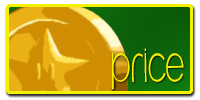
<style>
.page{position:relative;width:200px;height:100px;background:#ce8d03}
.page>*{position:absolute;margin:0}
.t1{font:48px "cafbrewery";color:#f3f000;scale:0.73 1}
</style>
<div class="page">
<p class="t1" style="left:112px;top:48px;width:72px;height:42px">price</p>
</div>
